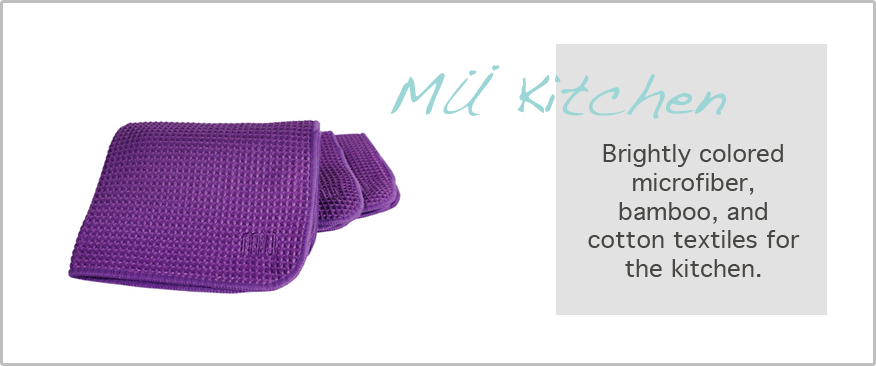
<style>
.page{position:relative;width:876px;height:366px;background:#ffffff}
.page>*{position:absolute;margin:0}
.t1{font:60px "Handwriting-Dakota";color:#9bd5d5}
.t2{font:24px "Geneva";color:#484743}
</style>
<div class="page">
<p class="t1" style="left:492px;top:65px;width:8px;height:6px">.</p>
<p class="t1" style="left:390px;top:72px;width:337px;height:47px">MU Kitchen</p>
<p class="t1" style="left:469px;top:70px;width:8px;height:6px">.</p>
<p class="t2" style="left:588px;top:144px;width:212px;height:133px;text-align:center">Brightly colored microfiber, bamboo, and cotton textiles for the kitchen.</p>
</div>
